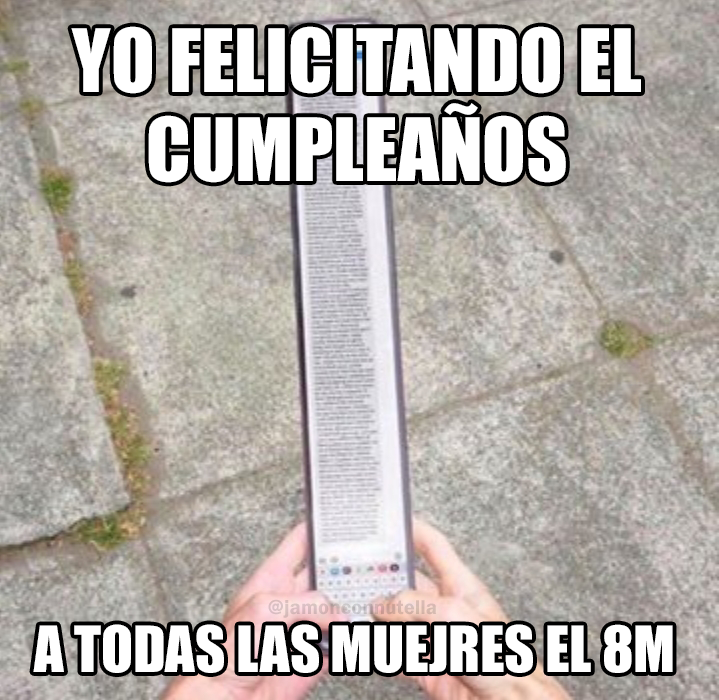
<style>
.page{position:relative;width:719px;height:700px}
.page>*{position:absolute;margin:0}
.t1{font:80.7px "Impact";color:#ffffff}
.t2{font:20.8px "FranklinGothic-Demi";color:#d6b9b5}
.t3{font:58.7px "Impact";color:#ffffff}
</style>
<div class="page">
<p class="t1" style="left:71px;top:26px;width:570px;height:157px;text-align:center">YO FELICITANDO EL<br>CUMPLEAÑOS</p>
<p class="t2" style="left:268px;top:599px;width:169px;height:19px">@jamonconnutella</p>
<p class="t3" style="left:33px;top:624px;width:640px;height:49px">A TODAS LAS MUEJRES EL 8M</p>
</div>
